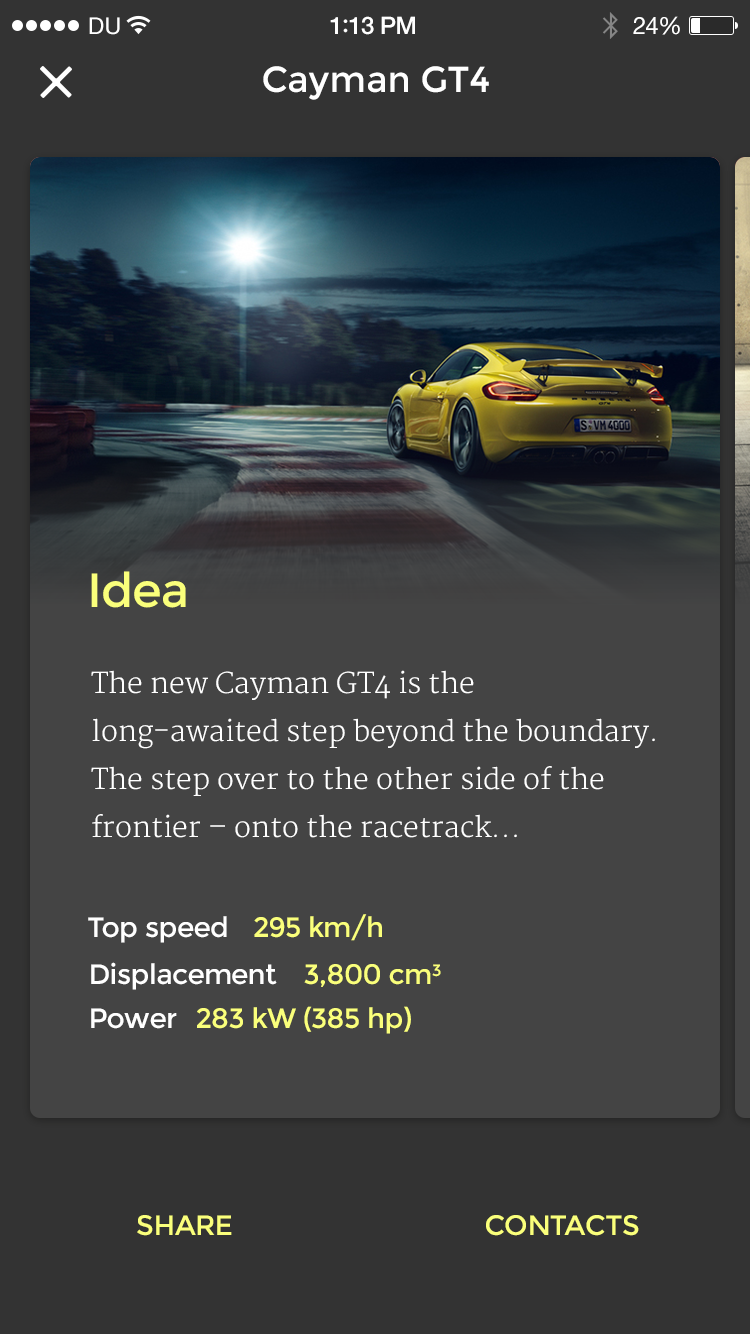
<style>
.page{position:relative;width:750px;height:1334px;background:#444444}
.page>*{position:absolute;margin:0}
.t1{font:23px "HelveticaNeue";letter-spacing:0.02em;color:#ffffff}
.t2{font:24px "HelveticaNeue-Medium";letter-spacing:-0.02em;color:#ffffff}
.t3{font:26px "Avenir-Medium";letter-spacing:-0.02em;color:#ffffff}
.t4{font:24px "HelveticaNeue";letter-spacing:-0.02em;color:#ffffff}
.t5{font:36px "Montserrat-Regular";color:#ffffff}
.t6{font:48px "Montserrat-Regular";letter-spacing:-0.02em;color:#faff7b}
.t7{font:28px/48px "Merriweather-Light";color:#ffffff}
.t8{font:28px "Montserrat-Regular";letter-spacing:-0.02em;color:#ffffff}
.t9{font:28px "Montserrat-Regular";letter-spacing:-0.02em;color:#faff7b}
.t10{font:28px "Montserrat-Regular";letter-spacing:-0.02em;color:#faff7b;text-transform:uppercase}
</style>
<div class="page">
<p class="t1" style="left:89px;top:17px;width:31px;height:18px">DU</p>
<p class="t2" style="left:330px;top:16px;width:85px;height:19px">1<span class="t3">:</span>13 PM</p>
<p class="t4" style="left:633px;top:16px;width:47px;height:19px">24%</p>
<p class="t5" style="left:263px;top:66px;width:226px;height:34px">Cayman GT4</p>
<p class="t6" style="left:91px;top:571px;width:95px;height:37px">Idea</p>
<p class="t7" style="left:91px;top:670px;width:564px;height:168px">The new Cayman GT4 is the long-awaited step beyond the boundary. The step over to the other side of the frontier – onto the racetrack...</p>
<p class="t8" style="left:88px;top:914px;width:294px;height:29px">Top speed    <span class="t9">295 km/h</span></p>
<p class="t8" style="left:91px;top:962px;width:350px;height:28px">Displacement <span class="t9">3,800 cm³</span></p>
<p class="t9" style="left:91px;top:1006px;width:320px;height:28px"><span class="t8">Power </span>283 kW (385 hp)</p>
<p class="t10" style="left:137px;top:1215px;width:95px;height:21px">Share</p>
<p class="t10" style="left:486px;top:1215px;width:153px;height:21px">contacts</p>
</div>
